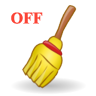
<style>
.page{position:relative;width:96px;height:96px;background:#ffffff}
.page>*{position:absolute;margin:0}
.t1{font:16px "TimesNewRomanPS-BoldMT";color:#fb4335}
</style>
<div class="page">
<p class="t1" style="left:11px;top:12px;width:32px;height:12px">OFF</p>
</div>
